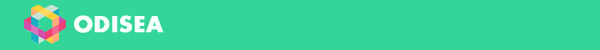
<style>
.page{position:relative;width:600px;height:50px;background:#33d599}
.page>*{position:absolute;margin:0}
.t1{font:24px "Aharoni-Bold";color:#f5fffb;font-weight:bold}
</style>
<div class="page">
<p class="t1" style="left:74px;top:15px;width:90px;height:18px">ODISEA</p>
</div>
